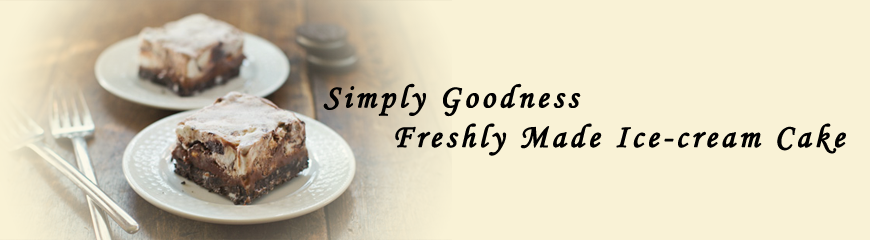
<style>
.page{position:relative;width:870px;height:240px;background:#f9f2d6}
.page>*{position:absolute;margin:0}
.t1{font:33px "MonotypeCorsiva";letter-spacing:0.1em;color:#000000;font-weight:bold}
</style>
<div class="page">
<p class="t1" style="left:323px;top:83px;width:523px;height:73px">Simply Goodness<br>      Freshly Made Ice-cream Cake</p>
</div>
